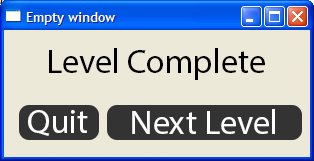
<style>
.page{position:relative;width:314px;height:161px;background:#ece9d8}
.page>*{position:absolute;margin:0}
.t1{font:34px "MyriadPro-Regular";color:#000000}
.t2{font:34px "MyriadPro-Regular";color:#ffffff}
</style>
<div class="page">
<p class="t1" style="left:49px;top:48px;width:216px;height:32px">Level Complete</p>
<p class="t2" style="left:28px;top:110px;width:60px;height:26px">Quit</p>
<p class="t2" style="left:132px;top:109px;width:143px;height:25px">Next Level</p>
</div>
